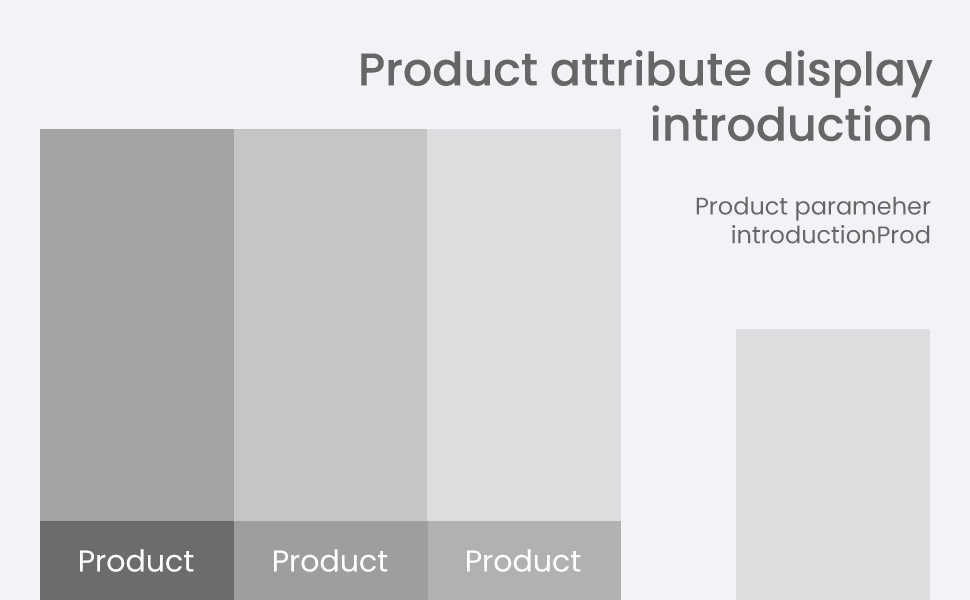
<style>
.page{position:relative;width:970px;height:600px;background:#f2f3f6}
.page>*{position:absolute;margin:0}
.t1{font:46px "Poppins-Medium";color:#666666}
.t2{font:24px "Poppins-Regular";color:#666666}
.t3{font:30px "Poppins-Regular";color:#ffffff}
</style>
<div class="page">
<p class="t1" style="left:361px;top:50px;width:572px;height:92px;text-align:right">Product attribute display<br>introduction</p>
<p class="t2" style="left:696px;top:196px;width:235px;height:48px;text-align:right">Product parameher<br>introductionProd</p>
<p class="t3" style="left:80px;top:549px;width:114px;height:23px">Product</p>
<p class="t3" style="left:274px;top:549px;width:114px;height:23px">Product</p>
<p class="t3" style="left:467px;top:549px;width:114px;height:23px">Product</p>
</div>
